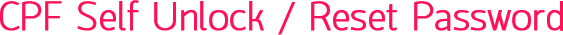
<style>
.page{position:relative;width:563px;height:35px;background:#ffffff}
.page>*{position:absolute;margin:0}
.t1{font:40px "Quark-Light";color:#ff1158;font-weight:bold}
</style>
<div class="page">
<p class="t1" style="left:0px;top:0px;width:563px;height:35px">CPF Self Unlock / Reset Password</p>
</div>
